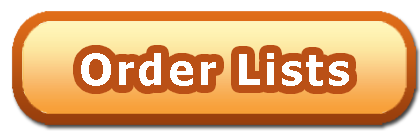
<style>
.page{position:relative;width:420px;height:135px;background:#ffffff}
.page>*{position:absolute;margin:0}
.t1{font:41.7px "Tahoma-Bold";letter-spacing:0.1em;color:#ffffff}
</style>
<div class="page">
<p class="t1" style="left:81px;top:53px;width:268px;height:33px">Order Lists</p>
</div>
